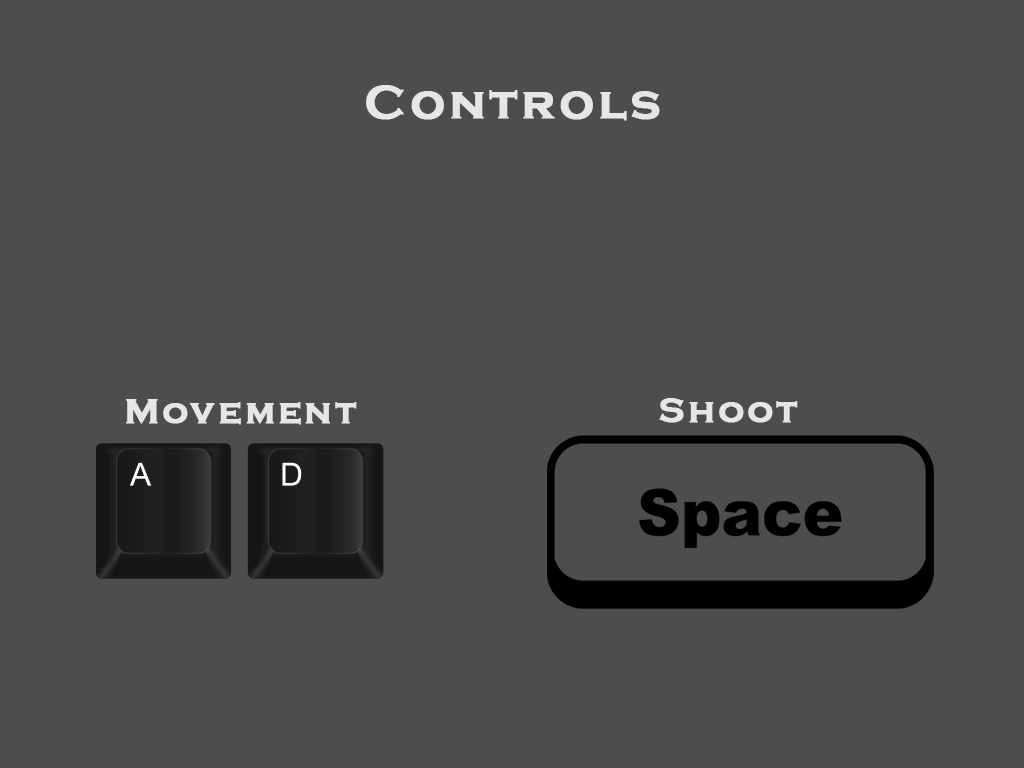
<style>
.page{position:relative;width:1024px;height:768px;background:#4d4d4d}
.page>*{position:absolute;margin:0}
.t1{font:48px "CopperplateGothic-Bold";letter-spacing:0.075em;color:#e6e6e6;font-weight:bold}
.t2{font:36px "CopperplateGothic-Bold";letter-spacing:0.075em;color:#e6e6e6;font-weight:bold}
</style>
<div class="page">
<p class="t1" style="left:366px;top:85px;width:294px;height:36px">Controls</p>
<p class="t2" style="left:126px;top:399px;width:231px;height:26px">Movement</p>
<p class="t2" style="left:659px;top:398px;width:139px;height:25px">Shoot</p>
</div>
